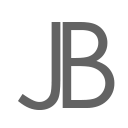
<style>
.page{position:relative;width:128px;height:128px;background:#ffffff}
.page>*{position:absolute;margin:0}
.t1{font:120px "CenturyGothic";letter-spacing:-0.16em;color:#636363}
</style>
<div class="page">
<p class="t1" style="left:18px;top:22px;width:97px;height:88px">JB</p>
</div>
